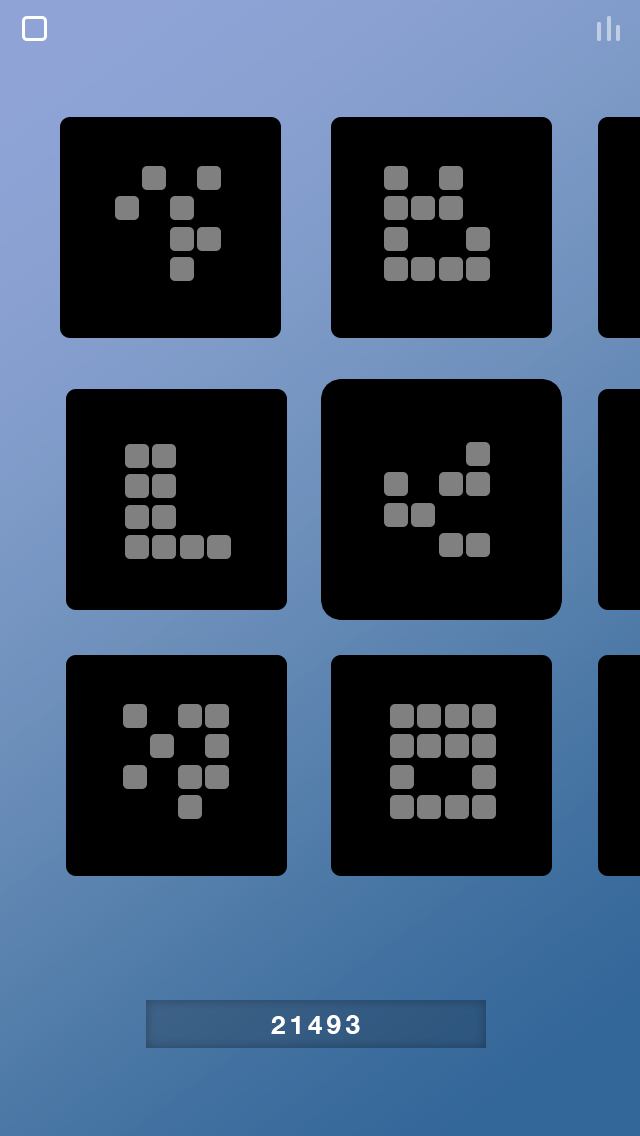
<style>
.page{position:relative;width:640px;height:1136px;background:#000000}
.page>*{position:absolute;margin:0}
.t1{font:26px "HelveticaNeue-Bold";letter-spacing:0.16em;color:#ffffff}
</style>
<div class="page">
<p class="t1" style="left:271px;top:1015px;width:89px;height:19px">21493</p>
</div>
